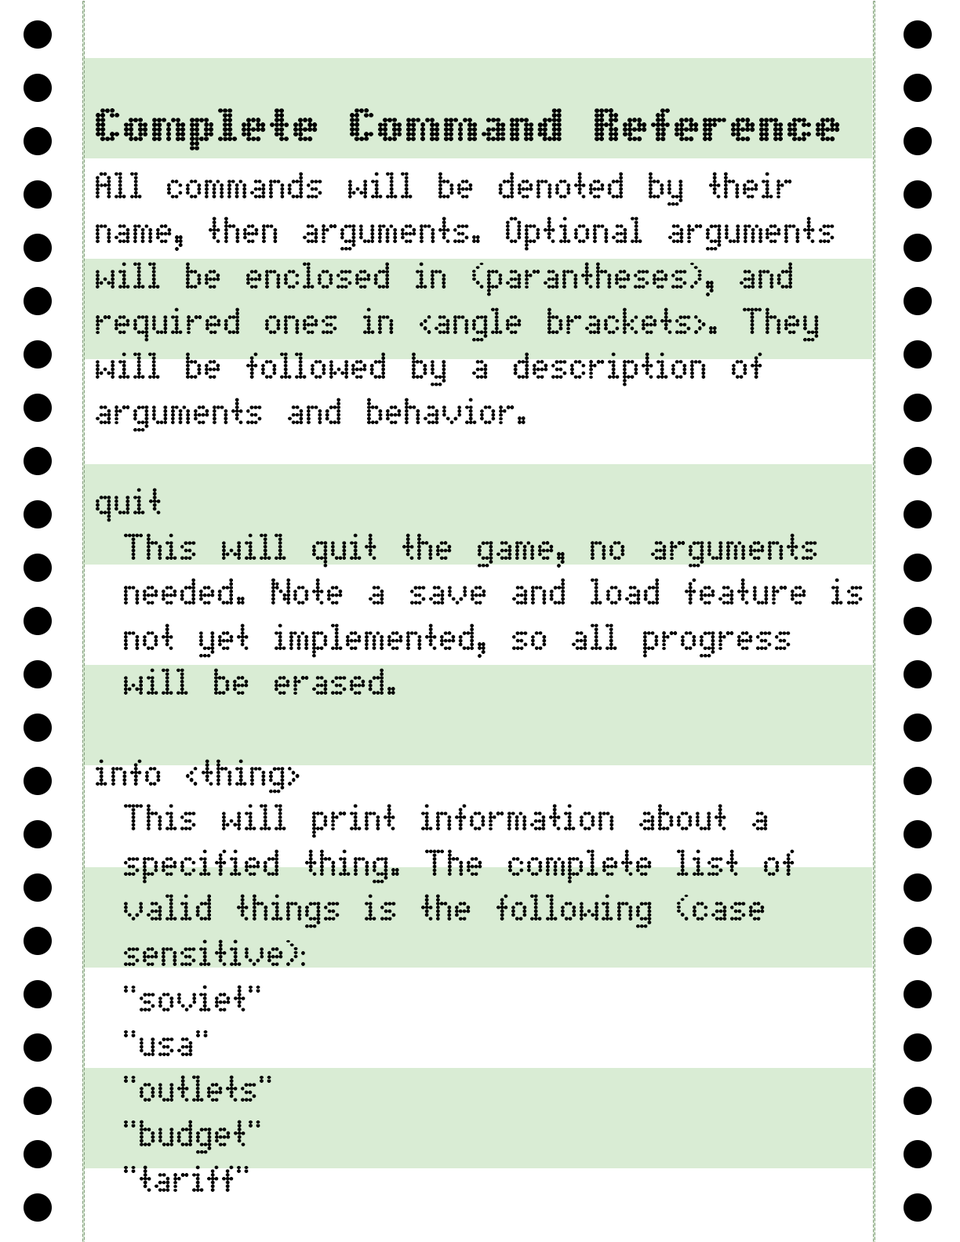
<style>
.page{position:relative;width:960px;height:1242px;background:#ffffff}
.page>*{position:absolute;margin:0}
.t1{font:47.1px "DotMatrixBold";color:#000000}
.t2{font:37.6px "DotMatrix";color:#000000}
</style>
<div class="page">
<p class="t1" style="left:96px;top:108px;width:744px;height:43px">Complete Command Reference</p>
<p class="t2" style="left:96px;top:172px;width:767px;height:1020px">All commands will be denoted by their<br>name, then arguments. Optional arguments<br>will be enclosed in (parantheses), and<br>required ones in &lt;angle brackets&gt;. They<br>will be followed by a description of<br>arguments and behavior.<br><br>quit<br> This will quit the game, no arguments<br> needed. Note a save and load feature is<br> not yet implemented, so all progress<br> will be erased.<br><br>info &lt;thing&gt;<br> This will print information about a<br> specified thing. The complete list of<br> valid things is the following (case<br> sensitive):<br> "soviet"<br> "usa"<br> "outlets"<br> "budget"<br> "tariff"</p>
</div>
